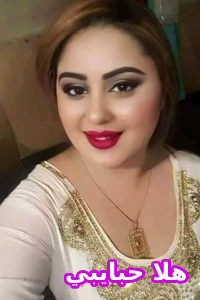
<style>
.page{position:relative;width:200px;height:300px}
.page>*{position:absolute;margin:0}
.t1{font:24px "DejaVuSans-Bold";color:#ffffff}
</style>
<div class="page">
<p class="t1" style="left:66px;top:261px;width:120px;height:25px">هلا حبايبي</p>
</div>
